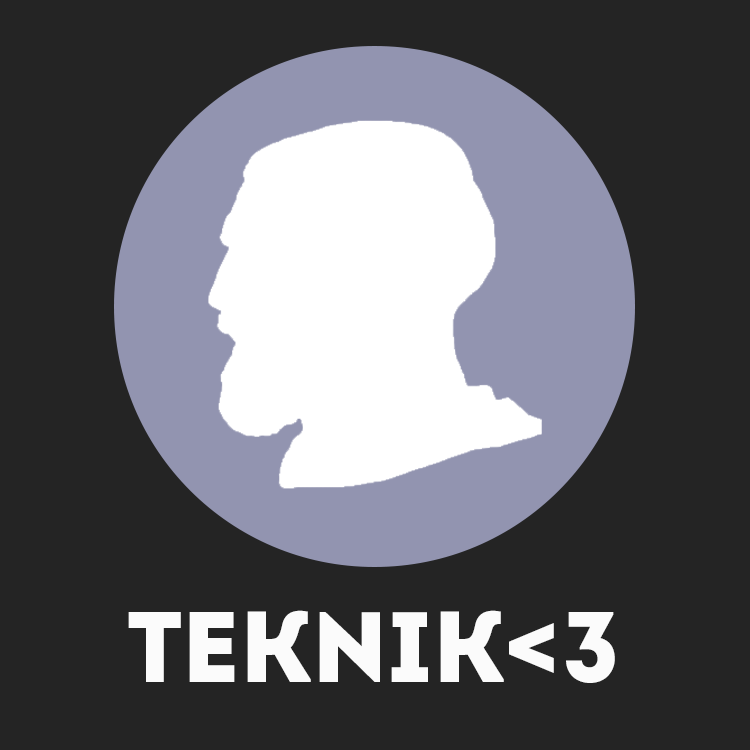
<style>
.page{position:relative;width:750px;height:750px;background:#242424}
.page>*{position:absolute;margin:0}
.t1{font:100px "Intro-Black";color:#fbfbfb}
</style>
<div class="page">
<p class="t1" style="left:128px;top:610px;width:487px;height:73px">TEKNIK&lt;3</p>
</div>
